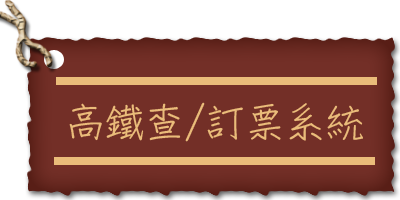
<style>
.page{position:relative;width:400px;height:200px;background:#732f27}
.page>*{position:absolute;margin:0}
.t1{font:40px "DFChu-W4-WIN-BF";color:#eabc7a}
</style>
<div class="page">
<p class="t1" style="left:69px;top:102px;width:294px;height:40px">高鐵查/訂票系統</p>
</div>
